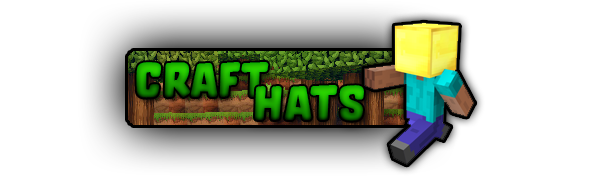
<style>
.page{position:relative;width:610px;height:176px;background:#ffffff}
.page>*{position:absolute;margin:0}
.t1{font:48px "Orgovan-Rounded"}
</style>
<div class="page">
<p class="t1" style="left:136px;top:62px;width:133px;height:36px">Craft</p>
<p class="t1" style="left:254px;top:85px;width:110px;height:36px">Hats</p>
</div>
